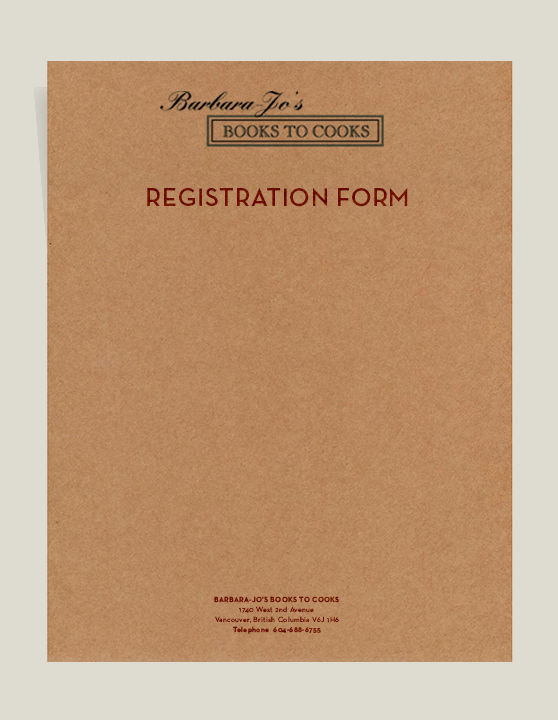
<style>
.page{position:relative;width:558px;height:720px;background:#dedbd0}
.page>*{position:absolute;margin:0}
.t1{font:26px "NeutraDisp-Bold";letter-spacing:0.04em;color:#6f0d00}
.t2{font:7.5px/10px "NeutraText-Book";letter-spacing:0.04em;color:#711100}
.t3{font:7.5px "NeutraText-Bold";letter-spacing:0.04em;color:#711100;text-transform:uppercase}
.t4{font:7.5px/10px "NeutraText-Bold";letter-spacing:0.04em;color:#711100}
</style>
<div class="page">
<p class="t1" style="left:147px;top:188px;width:261px;height:19px">REGISTRATION FORM</p>
<p class="t2" style="left:214px;top:596px;width:125px;height:38px;text-align:center"><span class="t3">Barbara-Jo's Books to Cooks <br></span>1740 West 2nd Avenue<br>Vancouver, British Columbia V6J 1H6<br><span class="t4">Telephone  604-688-6755</span></p>
</div>
